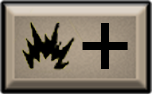
<style>
.page{position:relative;width:152px;height:94px}
.page>*{position:absolute;margin:0}
.t1{font:96.2px "ArialMT";color:#000000}
</style>
<div class="page">
<p class="t1" style="left:82px;top:23px;width:46px;height:46px">+</p>
</div>
